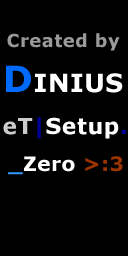
<style>
.page{position:relative;width:128px;height:256px;background:#000000}
.page>*{position:absolute;margin:0}
.t1{font:18px "Verdana-Bold";letter-spacing:0.025em;color:#999999}
.t2{font:36px "Verdana-Bold";letter-spacing:0.025em;color:#ffffff;font-variant:small-caps}
.t3{font:36px "Verdana-Bold";letter-spacing:0.025em;color:#006aff;font-variant:small-caps}
.t4{font:22px "Verdana-Bold";letter-spacing:0.025em;color:#ffffff}
.t5{font:22px "Verdana-Bold";letter-spacing:0.025em;color:#cccccc}
.t6{font:22px "Verdana-Bold";letter-spacing:0.025em;color:#000099}
.t7{font:20px "Verdana-Bold";letter-spacing:0.025em;color:#ffffff}
.t8{font:20px "Verdana-Bold";letter-spacing:0.025em;color:#3399ff}
.t9{font:20px "Verdana-Bold";letter-spacing:0.025em;color:#993300}
</style>
<div class="page">
<p class="t1" style="left:7px;top:33px;width:113px;height:18px">Created by</p>
<p class="t2" style="left:6px;top:65px;width:117px;height:28px"><span class="t3">D</span>inius</p>
<p class="t4" style="left:3px;top:117px;width:123px;height:22px"><span class="t5">eT</span><span class="t6">|</span>Setup<span class="t6">.</span></p>
<p class="t7" style="left:8px;top:156px;width:115px;height:19px"><span class="t8">_</span>Zero <span class="t9">&gt;:3</span></p>
</div>
